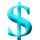
<style>
.page{position:relative;width:40px;height:40px;background:#ffffff}
.page>*{position:absolute;margin:0}
.t1{font:46px "VNI-Times-Bold";scale:1.2 1}
</style>
<div class="page">
<p class="t1" style="left:7px;top:2px;width:25px;height:40px">$</p>
</div>
